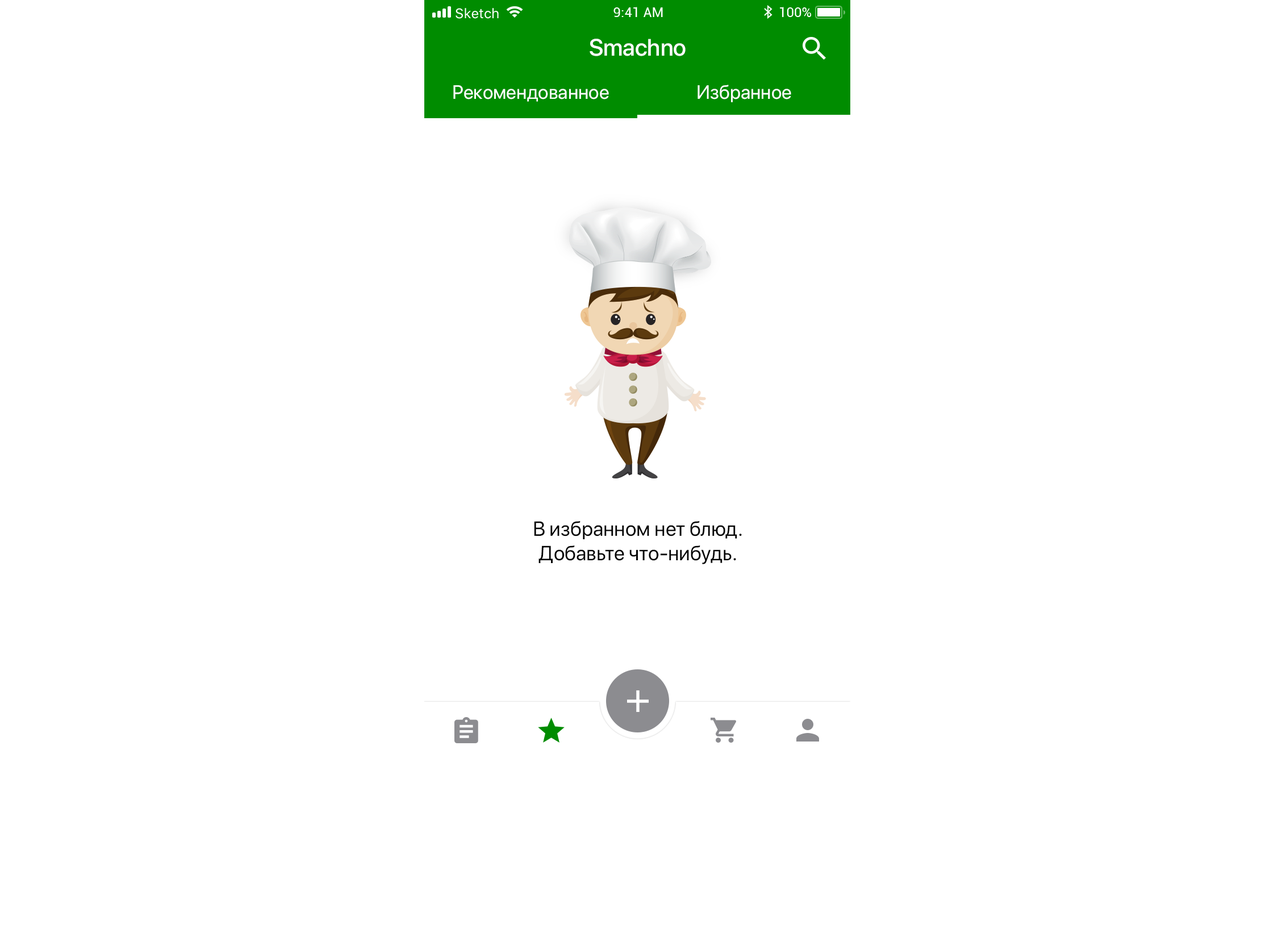
<style>
.page{position:relative;width:1278px;height:933px;background:#ffffff}
.page>*{position:absolute;margin:0}
.t1{font:23.7px "SFProDisplay-Medium";color:#ffffff}
.t2{font:19.3px "SFProDisplay-Regular";color:#ffffff}
.t3{font:20.5px "SFProDisplay-Regular";color:#000000}
</style>
<div class="page">
<p class="t1" style="left:590px;top:39px;width:96px;height:17px">Smachno</p>
<p class="t2" style="left:453px;top:85px;width:156px;height:17px">Рекомендованное</p>
<p class="t2" style="left:698px;top:85px;width:93px;height:17px">Избранное</p>
<p class="t3" style="left:534px;top:520px;width:208px;height:44px;text-align:center">В избранном нет блюд.<br>Добавьте что-нибудь.</p>
</div>
